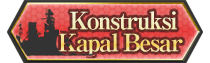
<style>
.page{position:relative;width:210px;height:63px}
.page>*{position:absolute;margin:0}
.t1{font:24px/22px "RyuminPro-ExBold";letter-spacing:-0.08em}
</style>
<div class="page">
<p class="t1" style="left:58px;top:11px;width:125px;height:45px;text-align:center">Konstruksi<br>Kapal Besar</p>
</div>
